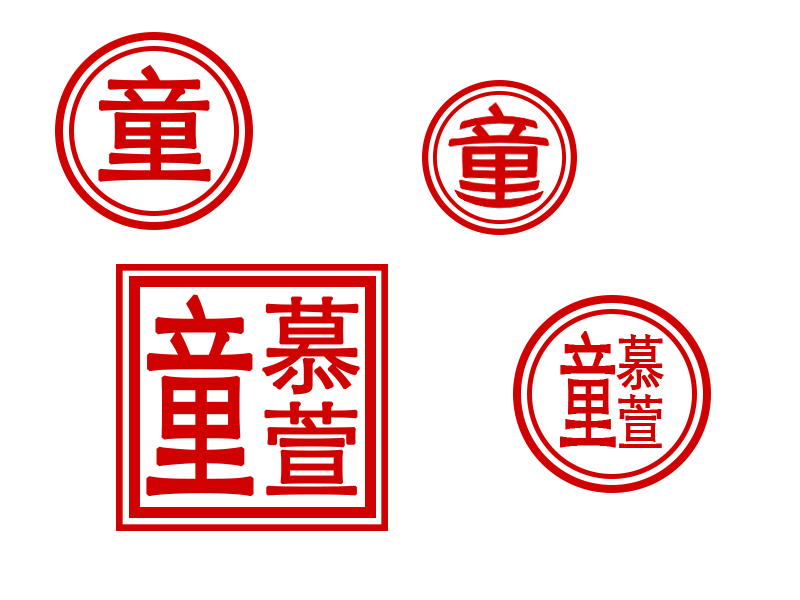
<style>
.page{position:relative;width:800px;height:600px;background:#ffffff}
.page>*{position:absolute;margin:0}
.t1{font:125px "STHeitiSC-Light";color:#cf0101;font-weight:bold}
.t2{font:221.2px "STHeitiSC-Light";color:#cf0101;font-weight:bold;scale:0.53 1}
.t3{font:104.2px/104.2px "STHeitiSC-Light";color:#cf0101;font-weight:bold}
.t4{font:127.8px "STHeitiSC-Light";color:#cf0101;font-weight:bold;scale:0.49 1}
.t5{font:59.5px/59.5px "STHeitiSC-Light";color:#cf0101;font-weight:bold;scale:0.82 1}
</style>
<div class="page">
<p class="t1" style="left:98px;top:64px;width:113px;height:118px">童</p>
<p class="t2" style="left:146px;top:294px;width:108px;height:203px">童</p>
<p class="t3" style="left:262px;top:296px;width:98px;height:200px;text-align:center">慕<br>萱</p>
<p class="t4" style="left:560px;top:331px;width:56px;height:117px">童</p>
<p class="t5" style="left:616px;top:334px;width:48px;height:114px;text-align:center">慕<br>萱</p>
</div>
